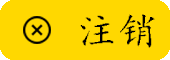
<style>
.page{position:relative;width:170px;height:60px;background:#ffd800}
.page>*{position:absolute;margin:0}
.t1{font:40px "¿¬Ìå";color:#000000}
</style>
<div class="page">
<p class="t1" style="left:80px;top:14px;width:75px;height:34px">注销</p>
</div>
